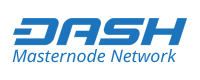
<style>
.page{position:relative;width:200px;height:80px;background:#ffffff}
.page>*{position:absolute;margin:0}
.t1{font:17px "NotoSans-Italic";color:#1c75bc;scale:1.04 1}
</style>
<div class="page">
<p class="t1" style="left:12px;top:49px;width:165px;height:14px">Masternode Network</p>
</div>
